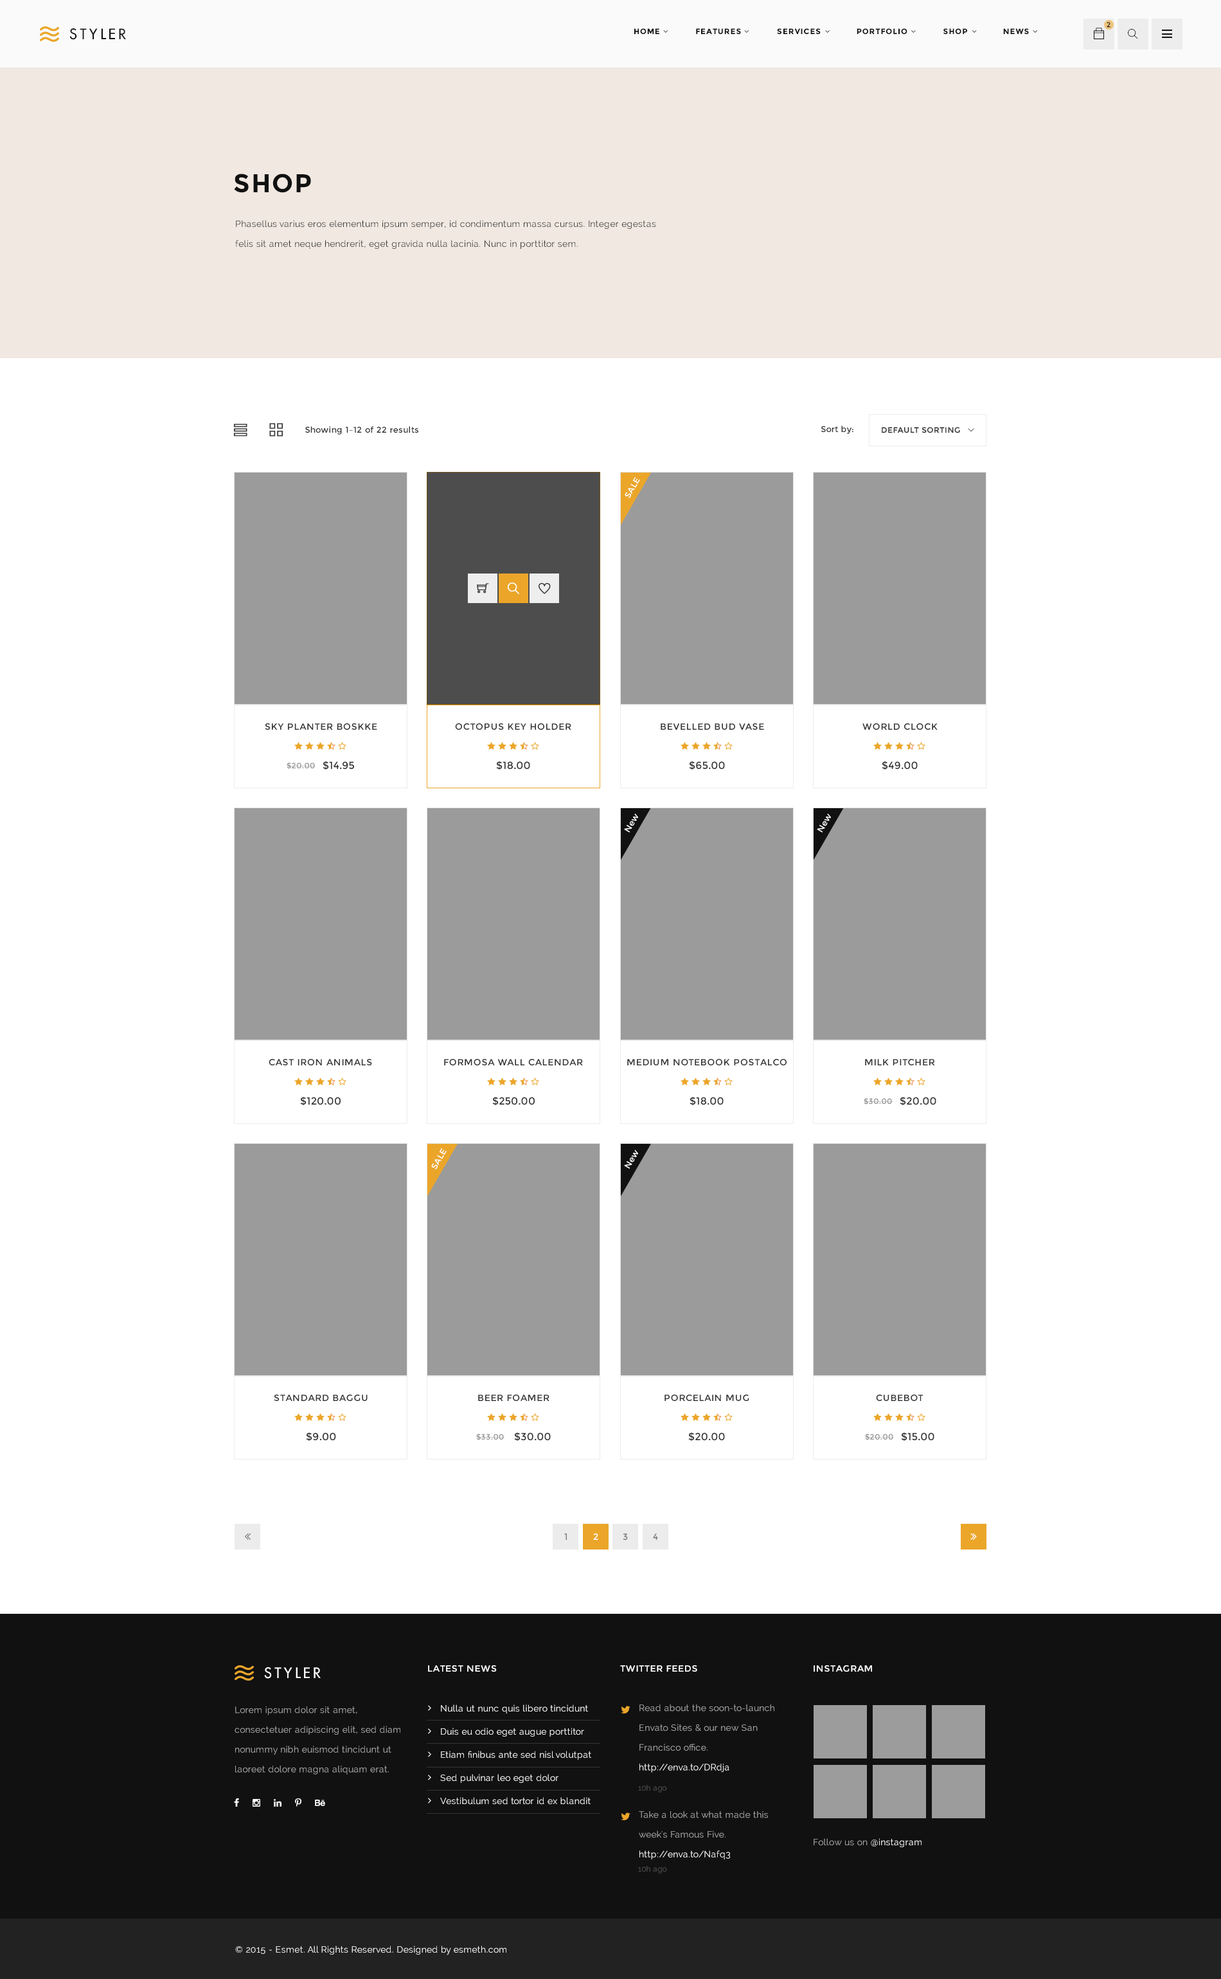
<style>
.page{position:relative;width:1221px;height:1979px;background:#ffffff}
.page>*{position:absolute;margin:0}
.t1{font:14.1px "FuturaLT";letter-spacing:0.2em;color:#111111;text-transform:uppercase}
.t2{font:7.7px "Montserrat-Bold";letter-spacing:0.075em;color:#111111;text-transform:uppercase}
.t3{font:7.1px "Montserrat-Regular";letter-spacing:0.075em;color:#111111;text-transform:uppercase}
.t4{font:25.7px "Montserrat-Bold";letter-spacing:0.05em;color:#111111;text-transform:uppercase}
.t5{font:9px/19.8px "Raleway";letter-spacing:0.02em;color:#333333}
.t6{font:8.4px "Montserrat-Regular";letter-spacing:0.02em;color:#333333}
.t7{font:7.7px "Montserrat-Regular";letter-spacing:0.05em;color:#333333;text-transform:uppercase}
.t8{font:8.4px "Montserrat-Regular";letter-spacing:0.02em;color:#ffffff}
.t9{font:9px "Montserrat-Regular";letter-spacing:0.05em;color:#333333;text-transform:uppercase}
.t10{font:10.3px "Montserrat-Regular";letter-spacing:0.02em;color:#333333;text-transform:uppercase}
.t11{font:7.7px "Montserrat-Regular";letter-spacing:0.05em;color:#929292;text-transform:uppercase}
.t12{font:9px "Montserrat-Regular";letter-spacing:0.05em;color:#777777;text-transform:uppercase}
.t13{font:9px "Montserrat-Regular";letter-spacing:0.05em;color:#ffffff;text-transform:uppercase}
.t14{font:14.1px "FuturaLT";letter-spacing:0.2em;color:#ffffff;text-transform:uppercase}
.t15{font:9px/19.8px "Raleway";letter-spacing:0.02em;color:#a9a9a9}
.t16{font:9px/23.1px "Raleway";letter-spacing:0.02em;color:#ffffff}
.t17{font:9px/19.8px "Raleway";letter-spacing:0.02em;color:#ffffff}
.t18{font:7.7px "Raleway";letter-spacing:0.02em;color:#545454}
.t19{font:9px "Raleway";letter-spacing:0.02em;color:#a9a9a9}
.t20{font:9px "Raleway";letter-spacing:0.02em;color:#ffffff}
</style>
<div class="page">
<p class="t1" style="left:69px;top:28px;width:57px;height:12px">styler</p>
<p class="t2" style="left:634px;top:28px;width:395px;height:6px">HOME              FEATURES              SERVICES              portfolio              SHOP              NEWS</p>
<p class="t3" style="left:1107px;top:22px;width:4px;height:6px">2</p>
<p class="t4" style="left:234px;top:174px;width:77px;height:19px">Shop</p>
<p class="t5" style="left:235px;top:220px;width:421px;height:29px">Phasellus varius eros elementum ipsum semper, id condimentum massa cursus. Integer egestas felis sit amet neque hendrerit, eget gravida nulla lacinia. Nunc in porttitor sem.</p>
<p class="t6" style="left:821px;top:426px;width:33px;height:8px">Sort by:</p>
<p class="t6" style="left:305px;top:426px;width:114px;height:9px">Showing 1–12 of 22 results</p>
<p class="t7" style="left:882px;top:427px;width:78px;height:6px">Default sorting</p>
<p class="t8" style="left:625px;top:477px;width:15px;height:21px;rotate:-60deg">SALE</p>
<p class="t9" style="left:265px;top:723px;width:112px;height:7px">Sky Planter Boskke</p>
<p class="t9" style="left:455px;top:723px;width:117px;height:7px">Octopus Key Holder</p>
<p class="t9" style="left:661px;top:723px;width:103px;height:7px">Bevelled Bud Vase</p>
<p class="t9" style="left:863px;top:723px;width:75px;height:7px">world clock</p>
<p class="t10" style="left:323px;top:761px;width:31px;height:9px">$14.95</p>
<p class="t10" style="left:496px;top:761px;width:34px;height:9px">$18.00</p>
<p class="t10" style="left:689px;top:761px;width:36px;height:9px">$65.00</p>
<p class="t10" style="left:882px;top:761px;width:36px;height:9px">$49.00</p>
<p class="t11" style="left:287px;top:762px;width:29px;height:7px">$20.00</p>
<p class="t8" style="left:624px;top:813px;width:14px;height:20px;rotate:-60deg">New</p>
<p class="t8" style="left:817px;top:813px;width:14px;height:20px;rotate:-60deg">New</p>
<p class="t9" style="left:269px;top:1059px;width:103px;height:6px">Cast Iron Animals</p>
<p class="t9" style="left:444px;top:1059px;width:139px;height:6px">Formosa Wall Calendar</p>
<p class="t9" style="left:627px;top:1059px;width:160px;height:6px">Medium Notebook Postalco</p>
<p class="t9" style="left:865px;top:1059px;width:70px;height:6px">Milk Pitcher</p>
<p class="t10" style="left:300px;top:1097px;width:41px;height:9px">$120.00</p>
<p class="t10" style="left:492px;top:1097px;width:43px;height:9px">$250.00</p>
<p class="t10" style="left:690px;top:1097px;width:34px;height:9px">$18.00</p>
<p class="t10" style="left:900px;top:1097px;width:37px;height:9px">$20.00</p>
<p class="t11" style="left:864px;top:1098px;width:29px;height:6px">$30.00</p>
<p class="t8" style="left:431px;top:1148px;width:16px;height:21px;rotate:-60deg">SALE</p>
<p class="t8" style="left:624px;top:1149px;width:14px;height:20px;rotate:-60deg">New</p>
<p class="t9" style="left:274px;top:1394px;width:94px;height:7px">Standard Baggu</p>
<p class="t9" style="left:478px;top:1394px;width:72px;height:7px">Beer Foamer</p>
<p class="t9" style="left:665px;top:1394px;width:85px;height:7px">Porcelain Mug</p>
<p class="t9" style="left:876px;top:1394px;width:48px;height:7px">cubebot</p>
<p class="t10" style="left:306px;top:1432px;width:30px;height:9px">$9.00</p>
<p class="t11" style="left:476px;top:1434px;width:29px;height:6px">$33.00</p>
<p class="t10" style="left:514px;top:1432px;width:37px;height:9px">$30.00</p>
<p class="t10" style="left:688px;top:1432px;width:37px;height:9px">$20.00</p>
<p class="t11" style="left:865px;top:1434px;width:29px;height:6px">$20.00</p>
<p class="t10" style="left:901px;top:1432px;width:34px;height:9px">$15.00</p>
<p class="t12" style="left:564px;top:1533px;width:3px;height:7px">1</p>
<p class="t13" style="left:593px;top:1533px;width:5px;height:7px">2</p>
<p class="t12" style="left:623px;top:1533px;width:5px;height:7px">3</p>
<p class="t12" style="left:653px;top:1533px;width:5px;height:7px">4</p>
<p class="t14" style="left:264px;top:1667px;width:57px;height:12px">styler</p>
<p class="t13" style="left:428px;top:1665px;width:69px;height:6px">latest news</p>
<p class="t13" style="left:620px;top:1665px;width:78px;height:6px">twitter feeds</p>
<p class="t13" style="left:814px;top:1665px;width:58px;height:6px">instagram</p>
<p class="t15" style="left:235px;top:1706px;width:166px;height:68px">Lorem ipsum dolor sit amet, consectetuer adipiscing elit, sed diam nonummy nibh euismod tincidunt ut laoreet dolore magna aliquam erat.</p>
<p class="t16" style="left:440px;top:1704px;width:151px;height:101px">Nulla ut nunc quis libero tincidunt<br>Duis eu odio eget augue porttitor<br>Etiam finibus ante sed nisl volutpat<br>Sed pulvinar leo eget dolor<br>Vestibulum sed tortor id ex blandit</p>
<p class="t15" style="left:640px;top:1704px;width:135px;height:68px">Read about the soon-to-launch Envato Sites &amp; our new San Francisco office. <span class="t17">http://enva.to/DRdja</span></p>
<p class="t18" style="left:638px;top:1785px;width:29px;height:7px">10h ago</p>
<p class="t15" style="left:639px;top:1811px;width:129px;height:48px">Take a look at what made this week's Famous Five. <span class="t17">http://enva.to/Nafq3</span></p>
<p class="t19" style="left:814px;top:1838px;width:108px;height:9px">Follow us on <span class="t20">@instagram</span></p>
<p class="t18" style="left:638px;top:1866px;width:29px;height:7px">10h ago</p>
<p class="t20" style="left:235px;top:1945px;width:272px;height:10px">© 2015 - Esmet. All Rights Reserved. Designed by esmeth.com</p>
</div>
